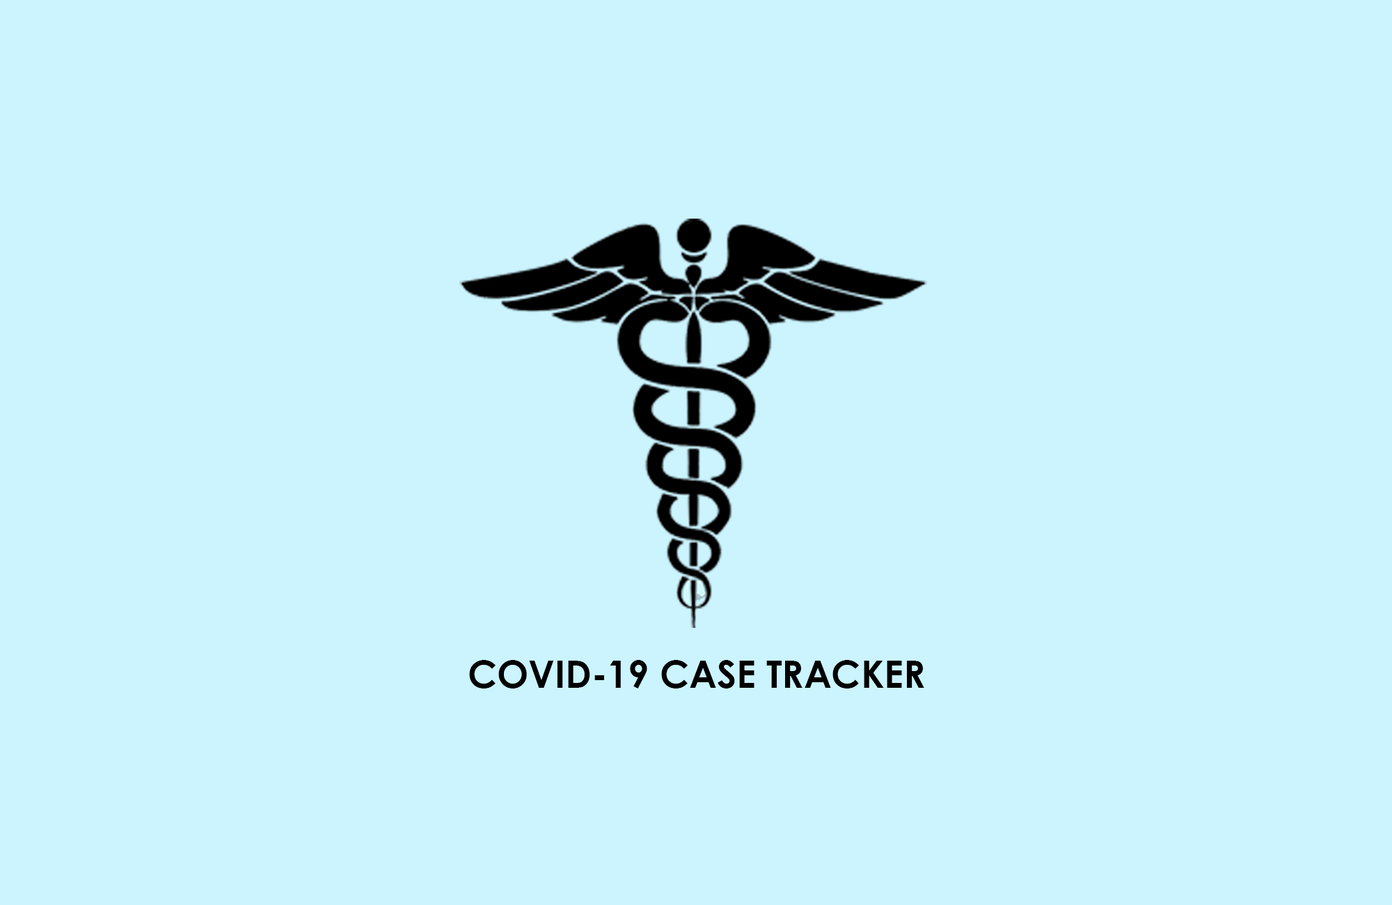
<style>
.page{position:relative;width:1392px;height:905px;background:#cbf4ff}
.page>*{position:absolute;margin:0}
.t1{font:9px "CenturyGothic-Bold";color:#000000}
</style>
<div class="page">
<p class="t1" style="left:469px;top:660px;width:455px;height:28px">COVID-19 CASE TRACKER</p>
</div>
